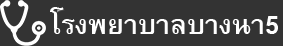
<style>
.page{position:relative;width:283px;height:46px;background:#333333}
.page>*{position:absolute;margin:0}
.t1{font:38px "BrowalliaUPC-Bold";color:#ffffff}
</style>
<div class="page">
<p class="t1" style="left:50px;top:7px;width:228px;height:27px">โรงพยาบาลบางนา5</p>
</div>
